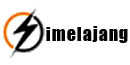
<style>
.page{position:relative;width:130px;height:65px;background:#ffffff}
.page>*{position:absolute;margin:0}
.t1{font:18px "Impact";color:#020202}
</style>
<div class="page">
<p class="t1" style="left:46px;top:27px;width:4px;height:14px">i</p>
<p class="t1" style="left:52px;top:29px;width:13px;height:12px">m</p>
<p class="t1" style="left:67px;top:29px;width:9px;height:12px">e</p>
<p class="t1" style="left:77px;top:27px;width:4px;height:14px">l</p>
<p class="t1" style="left:83px;top:29px;width:9px;height:12px">a</p>
<p class="t1" style="left:92px;top:26px;width:6px;height:16px">j</p>
<p class="t1" style="left:99px;top:29px;width:9px;height:12px">a</p>
<p class="t1" style="left:109px;top:29px;width:9px;height:12px">n</p>
<p class="t1" style="left:119px;top:29px;width:9px;height:14px">g</p>
</div>
